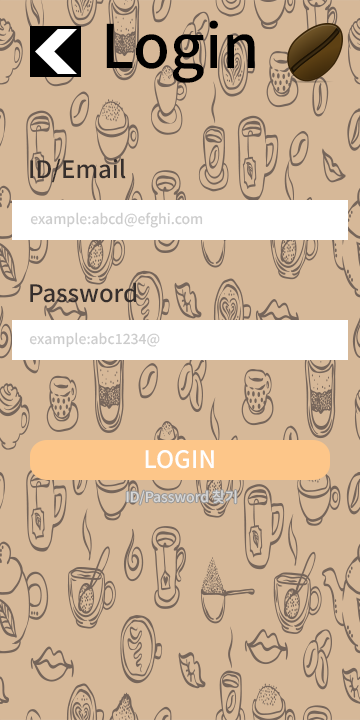
<style>
.page{position:relative;width:360px;height:720px;background:#d6b898}
.page>*{position:absolute;margin:0}
.t1{font:60px "NotoSansKR-Medium";color:#000000}
.t2{font:24px "NotoSansKR-Medium";color:#362f2d}
.t3{font:14px "NotoSansKR-Medium";color:#cccccc}
.t4{font:24px "NotoSansKR-Medium";color:#fefefe}
.t5{font:14px "NotoSansKR-Medium";color:#d7d7d7}
</style>
<div class="page">
<p class="t1" style="left:106px;top:20px;width:149px;height:63px">Login</p>
<p class="t2" style="left:30px;top:158px;width:96px;height:25px">ID/Email</p>
<p class="t3" style="left:30px;top:212px;width:173px;height:16px">example:abcd@efghi.com</p>
<p class="t2" style="left:30px;top:282px;width:106px;height:21px">Password</p>
<p class="t3" style="left:29px;top:332px;width:131px;height:16px">example:abc1234@</p>
<p class="t4" style="left:145px;top:450px;width:69px;height:19px">LOGIN</p>
<p class="t5" style="left:126px;top:490px;width:111px;height:15px">ID/Password 찾기</p>
</div>
